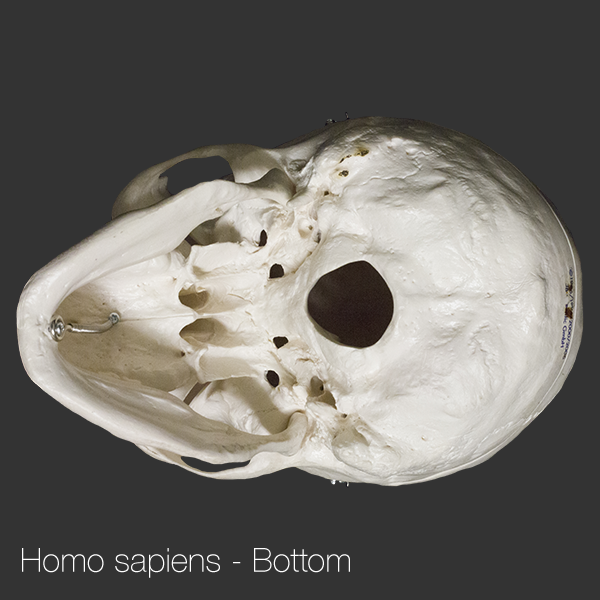
<style>
.page{position:relative;width:600px;height:600px;background:#333333}
.page>*{position:absolute;margin:0}
.t1{font:33.3px "HelveticaNeue-Thin";color:#ffffff}
</style>
<div class="page">
<p class="t1" style="left:22px;top:548px;width:328px;height:30px">Homo sapiens - Bottom</p>
</div>
